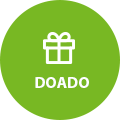
<style>
.page{position:relative;width:120px;height:126px;background:#78b823}
.page>*{position:absolute;margin:0}
.t1{font:16px "MyriadPro-Bold";color:#ffffff;text-transform:uppercase}
</style>
<div class="page">
<p class="t1" style="left:35px;top:77px;width:54px;height:11px">doado</p>
</div>
